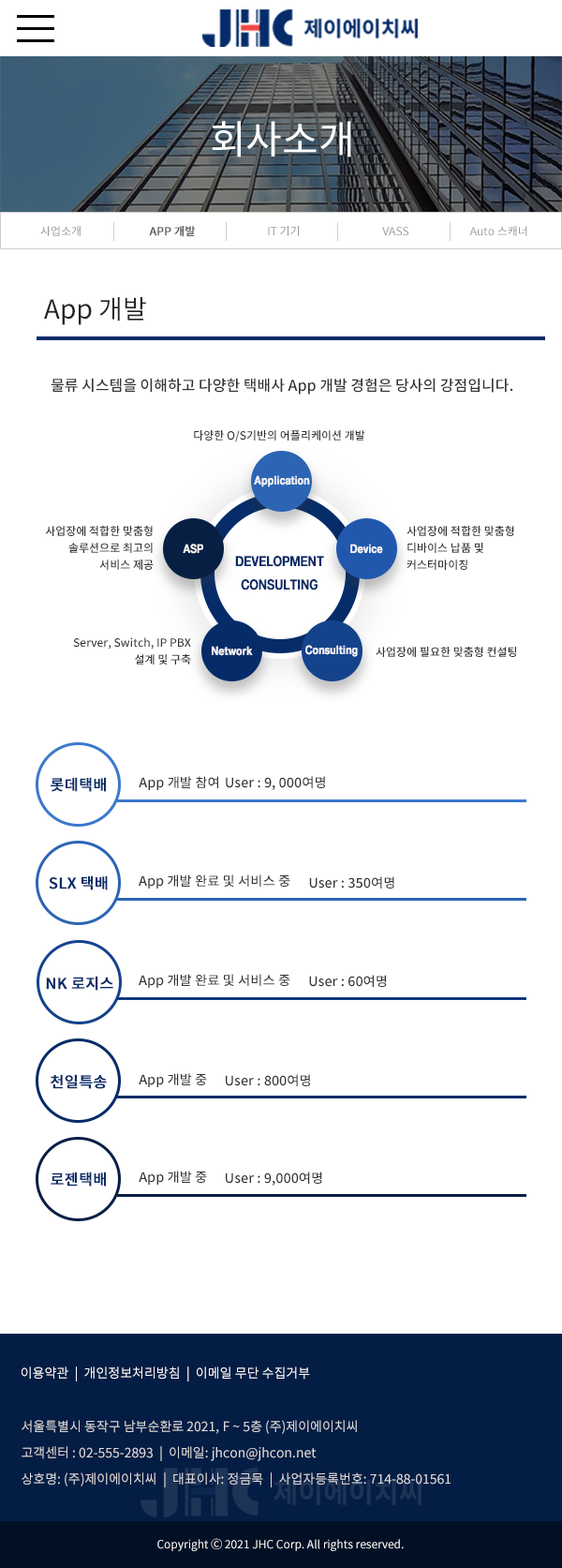
<style>
.page{position:relative;width:562px;height:1568px;background:#ffffff}
.page>*{position:absolute;margin:0}
.t1{font:39.4px "NotoSansKR-Regular";color:#ffffff}
.t2{font:11.2px "NotoSansKR-Regular";color:#959595}
.t3{font:11.2px "NotoSansKR-Regular";color:#595959;font-weight:bold}
.t4{font:26.2px "NotoSansKR-Regular";color:#242424}
.t5{font:15px "NotoSansKR-Medium";color:#333333}
.t6{font:11.2px "NotoSansKR-Medium";color:#333333}
.t7{font:11.2px "BusanBada";color:#f5f5f5;font-weight:bold}
.t8{font:11.2px/16.9px "NotoSansKR-Medium";color:#333333}
.t9{font:13.1px/23.6px "BusanBada";color:#052c69;font-weight:bold}
.t10{font:15px "NotoSansKR-Medium";color:#052c69;font-weight:bold}
.t11{font:13.1px "NotoSansKR-Medium";color:#333333}
.t12{font:13.1px "NotoSansKR-Regular";color:#ffffff}
.t13{font:13.1px/26.2px "NotoSansKR-Regular";color:#dddddd}
.t14{font:11.2px "NotoSansKR-Regular";color:#ffffff}
</style>
<div class="page">
<p class="t1" style="left:212px;top:121px;width:139px;height:36px">회사소개</p>
<p class="t2" style="left:40px;top:226px;width:41px;height:10px">사업소개</p>
<p class="t3" style="left:149px;top:226px;width:47px;height:11px">APP 개발</p>
<p class="t2" style="left:268px;top:226px;width:31px;height:10px">IT 기기</p>
<p class="t2" style="left:382px;top:227px;width:27px;height:9px">VASS</p>
<p class="t2" style="left:470px;top:226px;width:58px;height:10px">Auto 스캐너</p>
<p class="t4" style="left:44px;top:297px;width:102px;height:28px">App 개발</p>
<p class="t5" style="left:51px;top:378px;width:463px;height:17px">물류 시스템을 이해하고 다양한 택배사 App 개발 경험은 당사의 강점입니다.</p>
<p class="t6" style="left:194px;top:430px;width:172px;height:12px">다양한 O/S기반의 어플리케이션 개발</p>
<p class="t7" style="left:254px;top:475px;width:56px;height:12px">Application</p>
<p class="t8" style="left:45px;top:525px;width:109px;height:45px;text-align:right">사업장에 적합한 맞춤형<br>솔루션으로 최고의<br>서비스 제공</p>
<p class="t8" style="left:407px;top:525px;width:108px;height:45px">사업장에 적합한 맞춤형<br>디바이스 납품 및<br>커스터마이징</p>
<p class="t7" style="left:183px;top:544px;width:20px;height:10px">ASP</p>
<p class="t7" style="left:351px;top:544px;width:32px;height:10px">Device</p>
<p class="t9" style="left:235px;top:556px;width:89px;height:34px;text-align:center">DEVELOPMENT<br>CONSULTING</p>
<p class="t8" style="left:73px;top:637px;width:118px;height:28px;text-align:right">Server, Switch, IP PBX<br>설계 및 구축</p>
<p class="t7" style="left:212px;top:646px;width:41px;height:10px">Network</p>
<p class="t7" style="left:306px;top:645px;width:52px;height:12px">Consulting</p>
<p class="t6" style="left:376px;top:647px;width:140px;height:10px">사업장에 필요한 맞춤형 컨설팅</p>
<p class="t10" style="left:51px;top:777px;width:55px;height:15px">롯데택배</p>
<p class="t11" style="left:139px;top:776px;width:79px;height:14px">App 개발 참여</p>
<p class="t11" style="left:226px;top:776px;width:99px;height:14px">User : 9, 000여명</p>
<p class="t10" style="left:49px;top:875px;width:59px;height:15px">SLX 택배</p>
<p class="t11" style="left:139px;top:874px;width:152px;height:15px">App 개발 완료 및 서비스 중</p>
<p class="t11" style="left:309px;top:876px;width:86px;height:13px">User : 350여명</p>
<p class="t10" style="left:46px;top:976px;width:67px;height:15px">NK 로지스</p>
<p class="t11" style="left:139px;top:974px;width:152px;height:14px">App 개발 완료 및 서비스 중</p>
<p class="t11" style="left:309px;top:975px;width:78px;height:12px">User : 60여명</p>
<p class="t11" style="left:139px;top:1073px;width:68px;height:14px">App 개발 중</p>
<p class="t10" style="left:51px;top:1074px;width:56px;height:15px">천일특송</p>
<p class="t11" style="left:226px;top:1074px;width:84px;height:12px">User : 800여명</p>
<p class="t10" style="left:51px;top:1172px;width:55px;height:15px">로젠택배</p>
<p class="t11" style="left:139px;top:1171px;width:68px;height:14px">App 개발 중</p>
<p class="t11" style="left:226px;top:1172px;width:96px;height:14px">User : 9,000여명</p>
<p class="t12" style="left:22px;top:1366px;width:288px;height:15px">이용약관  |  개인정보처리방침  |  이메일 무단 수집거부</p>
<p class="t13" style="left:22px;top:1420px;width:429px;height:67px">서울특별시 동작구 남부순환로 2021, F ~ 5층 (주)제이에이치씨<br>고객센터 : 02-555-2893  |  이메일: jhcon@jhcon.net<br>상호명: (주)제이에이치씨  |  대표이사: 정금묵  |  사업자등록번호: 714-88-01561</p>
<p class="t14" style="left:157px;top:1538px;width:247px;height:13px">Copyright Ⓒ 2021 JHC Corp. All rights reserved.</p>
</div>
